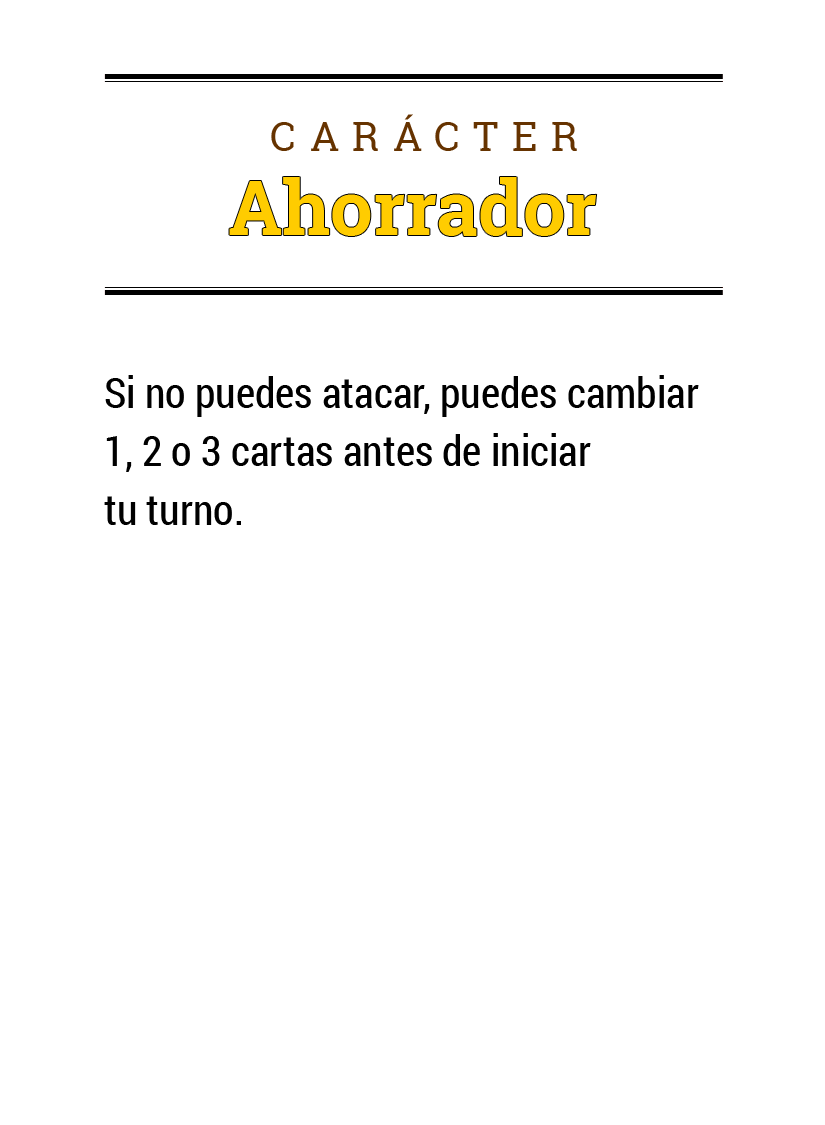
<style>
.page{position:relative;width:825px;height:1125px;background:#ffffff}
.page>*{position:absolute;margin:0}
.t1{font:40px "RobotoSlab-Regular";letter-spacing:0.34em;color:#663300}
.t2{font:76px "RobotoCondensed-Bold";color:#009933}
.t3{font:76px "RobotoSlab-Bold";color:#ffcc00}
.t4{font:76px "RobotoCondensed-Bold";color:#669933}
.t5{font:42px "RobotoCondensed-Regular";color:#000000}
</style>
<div class="page">
<p class="t1" style="left:271px;top:114px;width:306px;height:37px"><span class="t2"><br></span> CARÁCTER</p>
<p class="t3" style="left:229px;top:177px;width:368px;height:59px"><span class="t4"><br></span>Ahorrador</p>
<p class="t5" style="left:104px;top:375px;width:595px;height:150px">Si no puedes atacar, puedes cambiar <br>1, 2 o 3 cartas antes de iniciar <br>tu turno.</p>
</div>
